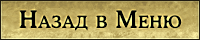
<style>
.page{position:relative;width:200px;height:40px}
.page>*{position:absolute;margin:0}
.t1{font:24px "OsvaldC-Bold";letter-spacing:0.03em;color:#000000;font-variant:small-caps}
</style>
<div class="page">
<p class="t1" style="left:19px;top:10px;width:163px;height:21px">Назад в Меню</p>
</div>
